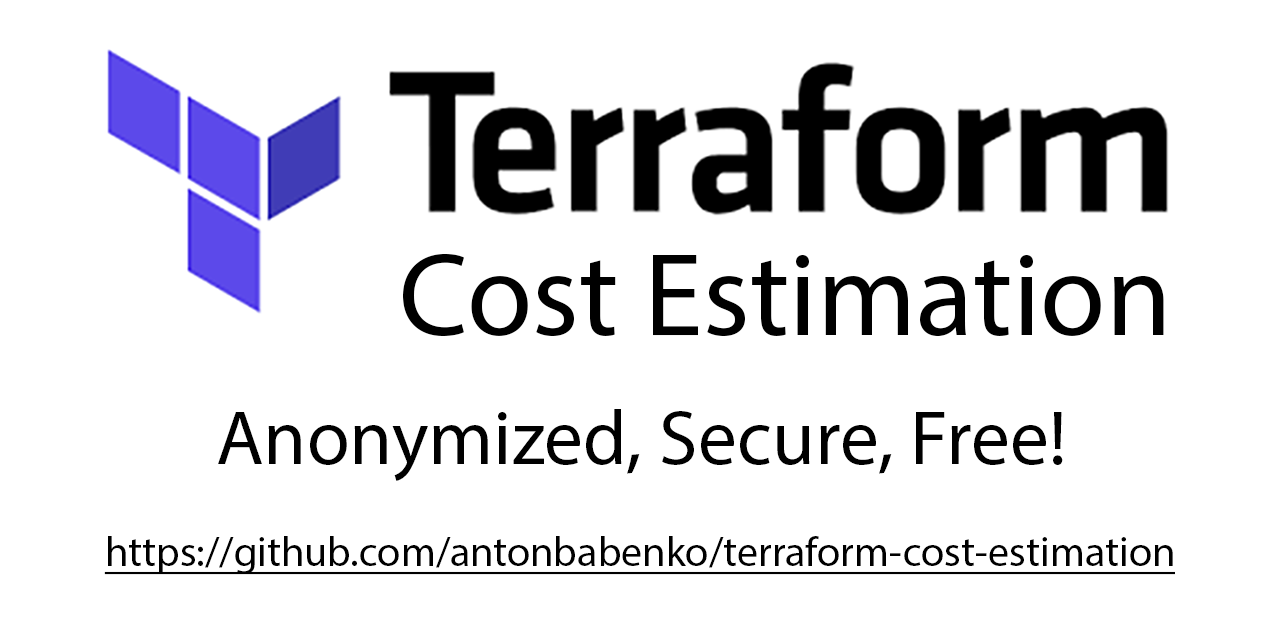
<style>
.page{position:relative;width:1280px;height:640px;background:#ffffff}
.page>*{position:absolute;margin:0}
.t1{font:119px "MyriadPro-Regular";color:#000000}
.t2{font:77.9px "MyriadPro-Regular";color:#000000}
.t3{font:42px "MyriadPro-Regular";color:#000000;text-decoration:underline}
</style>
<div class="page">
<p class="t1" style="left:403px;top:254px;width:761px;height:83px">Cost Estimation</p>
<p class="t2" style="left:218px;top:409px;width:845px;height:72px">Anonymized, Secure, Free!</p>
<p class="t3" style="left:104px;top:536px;width:1071px;height:39px">https://github.com/antonbabenko/terraform-cost-estimation</p>
</div>
